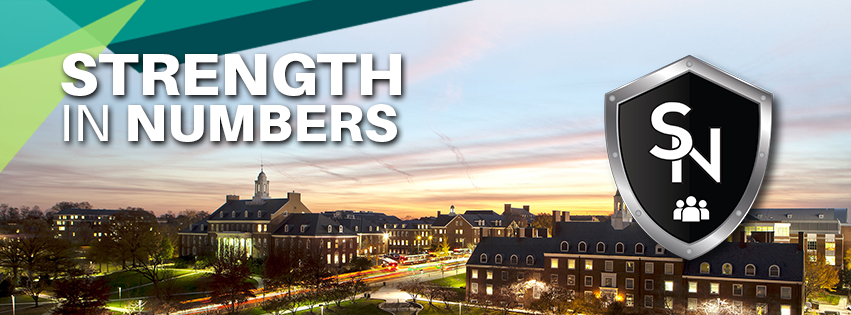
<style>
.page{position:relative;width:851px;height:315px}
.page>*{position:absolute;margin:0}
.t1{font:59.4px/45.9px "Aileron-Black";color:#ffffff;scale:1.05 1}
.t2{font:51.5px/45.9px "Aileron-Regular";color:#ffffff;scale:1.05 1}
.t3{font:51.5px/45.9px "Aileron-Black";color:#ffffff;scale:1.05 1}
</style>
<div class="page">
<p class="t1" style="left:61px;top:53px;width:340px;height:89px">STRENGTH<br><span class="t2">IN </span><span class="t3">NUMBERS</span></p>
</div>
